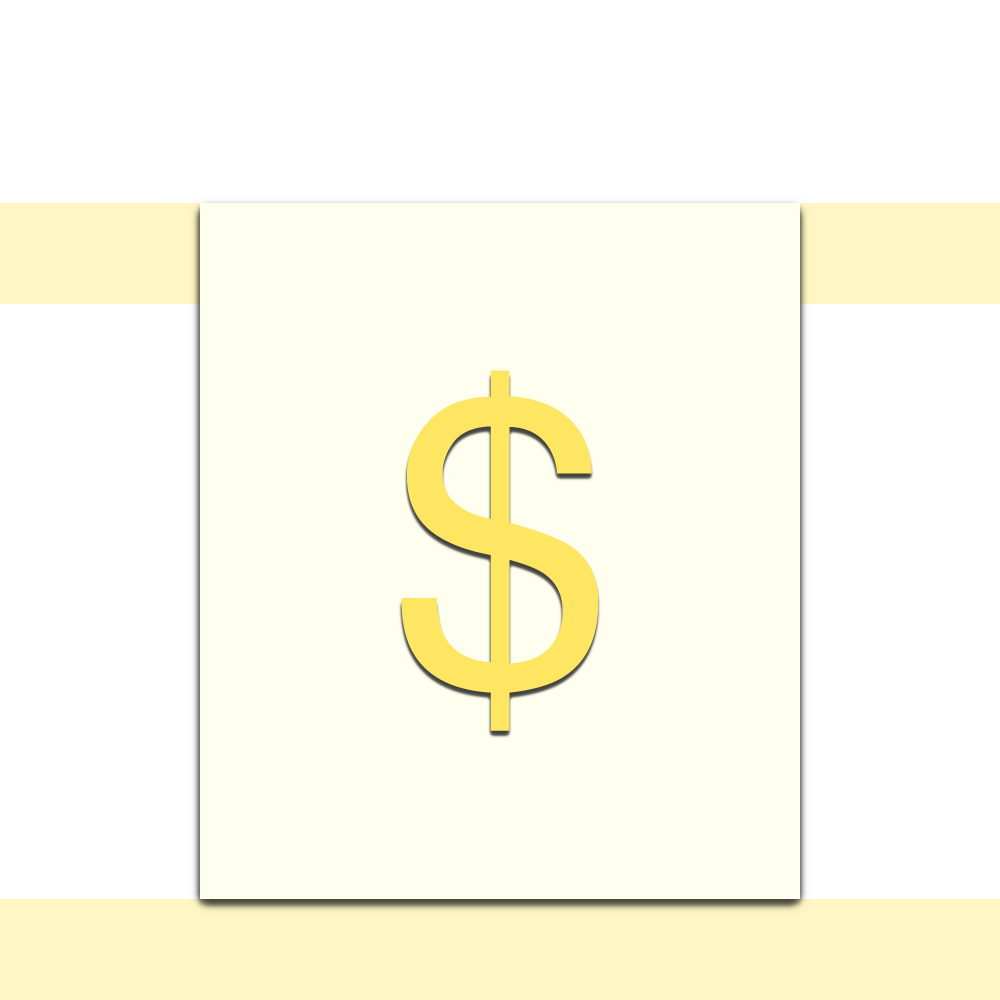
<style>
.page{position:relative;width:1000px;height:1000px;background:#ffffff}
.page>*{position:absolute;margin:0}
.t1{font:404.2px "Helvetica";color:#fee662}
</style>
<div class="page">
<p class="t1" style="left:401px;top:370px;width:198px;height:361px">$</p>
</div>
